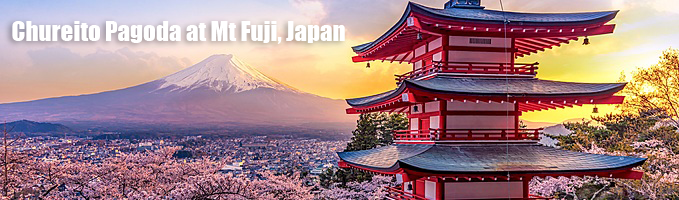
<style>
.page{position:relative;width:679px;height:200px}
.page>*{position:absolute;margin:0}
.t1{font:25px "Impact";color:#ffffff}
</style>
<div class="page">
<p class="t1" style="left:12px;top:21px;width:333px;height:23px">Chureito Pagoda at Mt Fuji, Japan</p>
</div>
